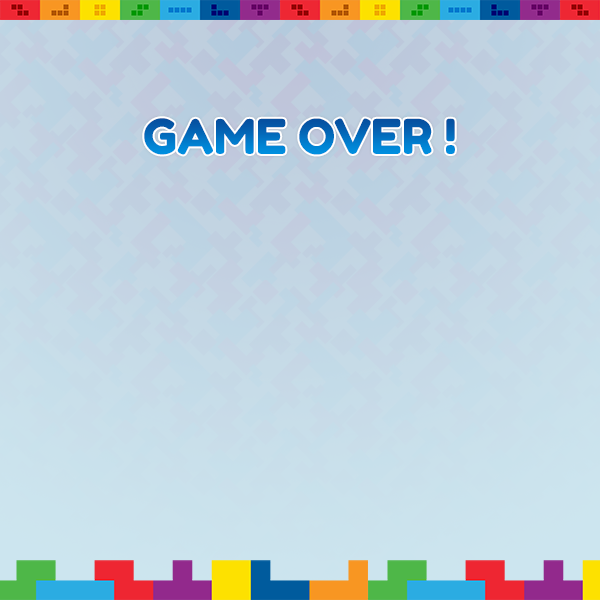
<style>
.page{position:relative;width:600px;height:600px}
.page>*{position:absolute;margin:0}
.t1{font:48px "FredokaOne-Regular";text-transform:uppercase}
</style>
<div class="page">
<p class="t1" style="left:144px;top:118px;width:311px;height:37px">GAME OVER !</p>
</div>
